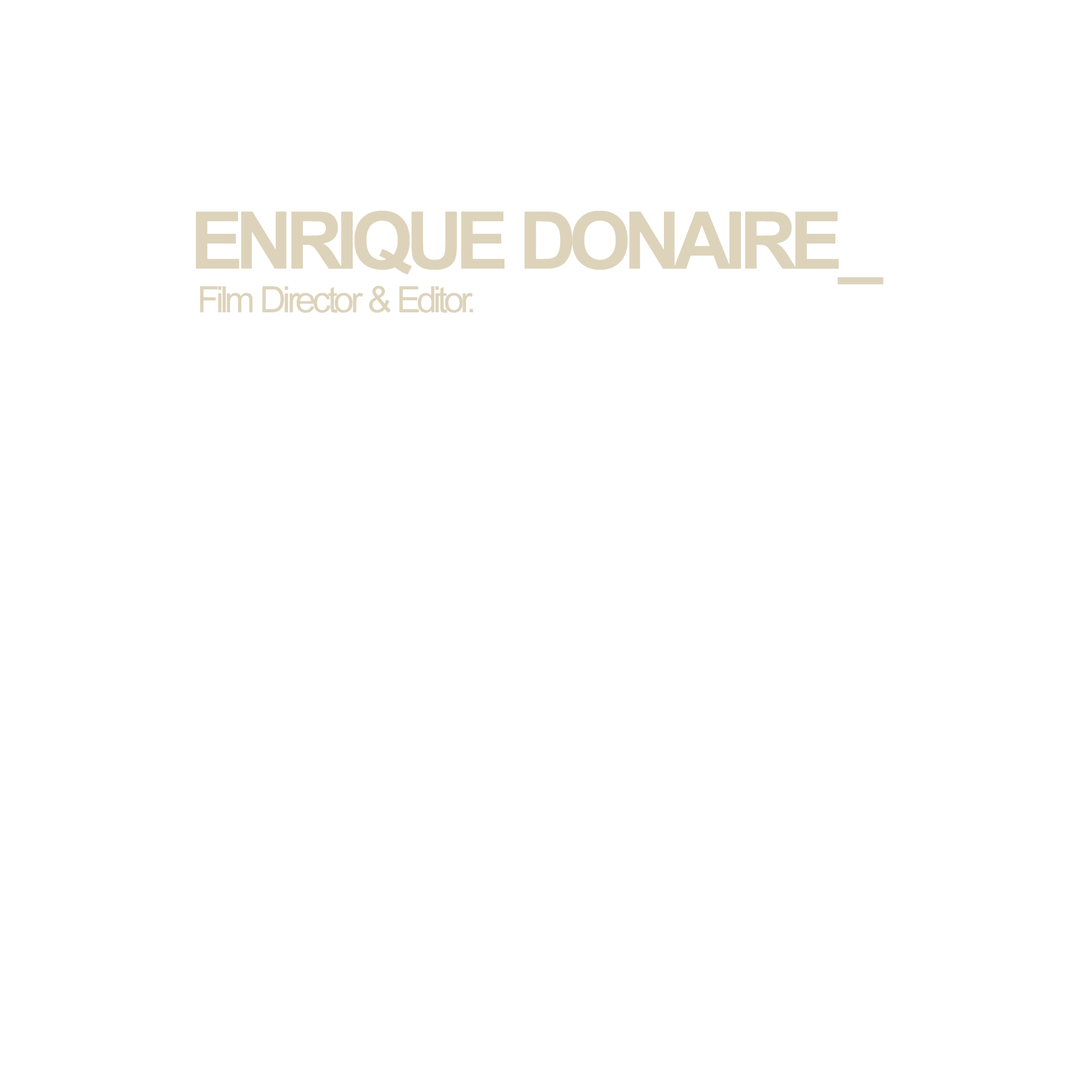
<style>
.page{position:relative;width:1092px;height:1092px;background:#ffffff}
.page>*{position:absolute;margin:0}
.t1{font:36.4px "ArialMT";letter-spacing:-0.075em;color:#ddd3ba}
.t2{font:79.6px "Arial-BoldMT";letter-spacing:-0.075em;color:#ddd3ba}
</style>
<div class="page">
<p class="t1" style="left:195px;top:211px;width:688px;height:102px"><span class="t2">ENRIQUE DONAIRE_<br></span> Film Director &amp; Editor.</p>
</div>
